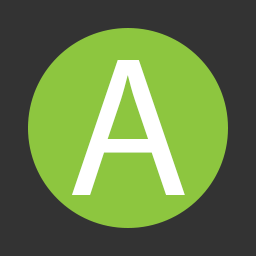
<style>
.page{position:relative;width:256px;height:256px;background:#333333}
.page>*{position:absolute;margin:0}
.t1{font:200px "MyriadPro-Regular";color:#ffffff}
</style>
<div class="page">
<p class="t1" style="left:72px;top:60px;width:113px;height:135px">A</p>
</div>
